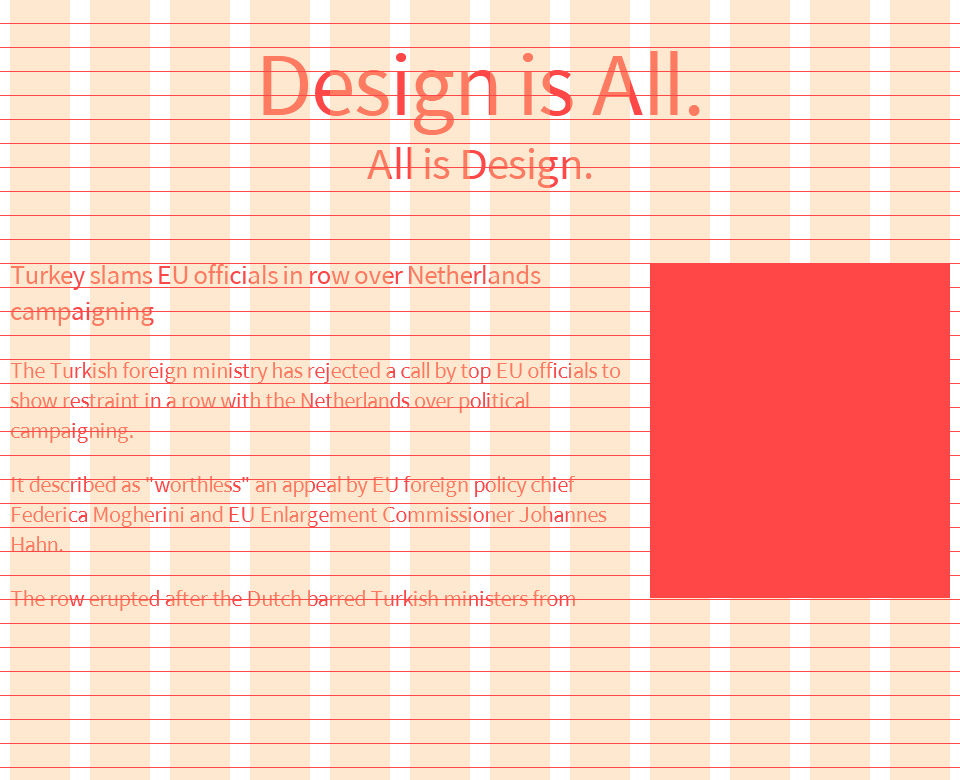
<style>
.page{position:relative;width:960px;height:780px;background:#fee8d0}
.page>*{position:absolute;margin:0}
.t1{font:80px/70px "SpoqaHanSans-Regular";letter-spacing:-0.02em;color:#fe7a61}
.t2{font:40px/40px "SpoqaHanSans-Regular";letter-spacing:-0.02em;color:#fe7a61}
.t3{font:24px "SpoqaHanSans-Regular";letter-spacing:-0.02em;color:#fe7a61}
.t4{font:20px "SpoqaHanSans-Regular";letter-spacing:-0.02em;color:#fe7a61}
</style>
<div class="page">
<p class="t1" style="left:263px;top:51px;width:437px;height:137px;text-align:center">Design is All.<br><span class="t2">All is Design.</span></p>
<p class="t3" style="left:11px;top:264px;width:530px;height:62px">Turkey slams EU officials in row over Netherlands campaigning</p>
<p class="t4" style="left:10px;top:362px;width:611px;height:249px">The Turkish foreign ministry has rejected a call by top EU officials to show restraint in a row with the Netherlands over political campaigning.<br>It described as "worthless" an appeal by EU foreign policy chief Federica Mogherini and EU Enlargement Commissioner Johannes Hahn.<br>The row erupted after the Dutch barred Turkish ministers from campaigning among expatriates for a referendum.<br>It comes before one of the most closely fought Dutch elections in years.<br>The referendum would controversially boost the powers of Turkish President Recep Tayyip Erdogan.<br>In response to the Dutch move, Turkey barred the Dutch ambassador from returning to Ankara and suspended high-level political talks, while Mr Erdogan accused the Dutch of using Nazi tactics.<br>The Dutch government cited "risks to public order and security" as reasons for blocking the Turkish rallies.</p>
</div>
